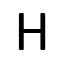
<style>
.page{position:relative;width:64px;height:64px;background:#ffffff}
.page>*{position:absolute;margin:0}
.t1{font:58.3px "Calibri";color:#000000}
</style>
<div class="page">
<p class="t1" style="left:18px;top:13px;width:28px;height:37px">Н</p>
</div>
